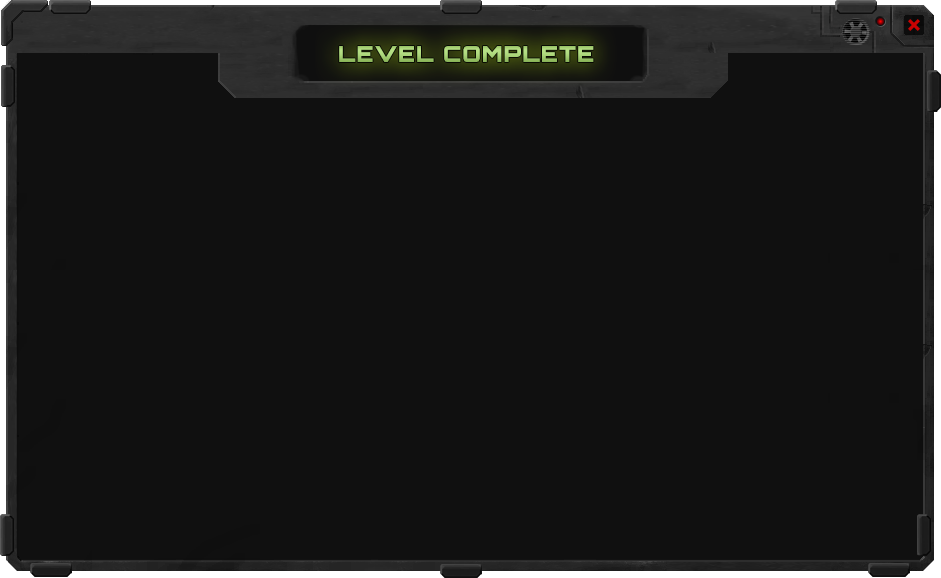
<style>
.page{position:relative;width:941px;height:578px;background:#101010}
.page>*{position:absolute;margin:0}
.t1{font:22px "Orbitron-Black";letter-spacing:0.06em;color:#a4ce73}
</style>
<div class="page">
<p class="t1" style="left:339px;top:46px;width:255px;height:16px">LEVEL COMPLETE</p>
</div>
